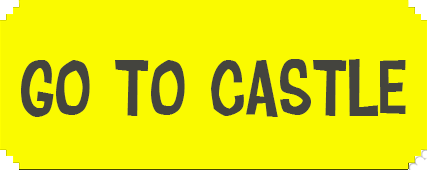
<style>
.page{position:relative;width:427px;height:170px;background:#fafa00}
.page>*{position:absolute;margin:0}
.t1{font:104.4px "CartonsixNC";color:#44443e;scale:0.92 1}
</style>
<div class="page">
<p class="t1" style="left:21px;top:59px;width:385px;height:58px">Go to castle</p>
</div>
